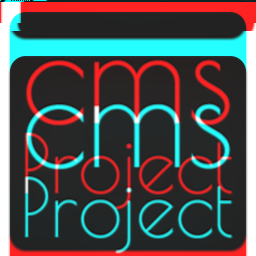
<style>
.page{position:relative;width:256px;height:256px}
.page>*{position:absolute;margin:0}
.t1{font:134.8px "PoiretOne-Regular"}
.t2{font:80px "PoiretOne-Regular"}
</style>
<div class="page">
<p class="t1" style="left:26px;top:57px;width:204px;height:65px">cms</p>
<p class="t2" style="left:25px;top:130px;width:207px;height:76px">Project</p>
</div>
